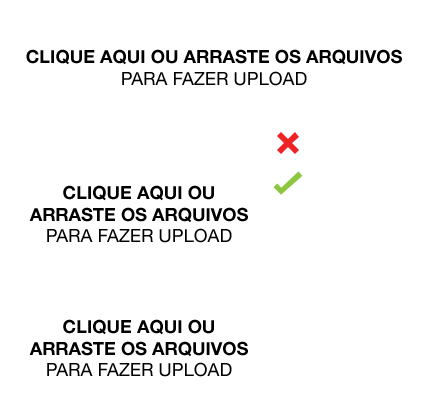
<style>
.page{position:relative;width:428px;height:406px;background:#ffffff}
.page>*{position:absolute;margin:0}
.t1{font:18px "HelveticaNeue-Bold";color:#000000;text-transform:uppercase}
.t2{font:18px "HelveticaNeue";color:#000000;text-transform:uppercase}
</style>
<div class="page">
<p class="t1" style="left:26px;top:49px;width:376px;height:37px;text-align:center">Clique AQUI ou ARRASTE os arquivos<br><span class="t2">para fazer upload</span></p>
<p class="t1" style="left:29px;top:185px;width:219px;height:58px;text-align:center">Clique AQUI ou<br>ARRASTE os arquivos<br><span class="t2">para fazer upload</span></p>
<p class="t1" style="left:29px;top:319px;width:219px;height:58px;text-align:center">Clique AQUI ou<br>ARRASTE os arquivos<br><span class="t2">para fazer upload</span></p>
</div>
